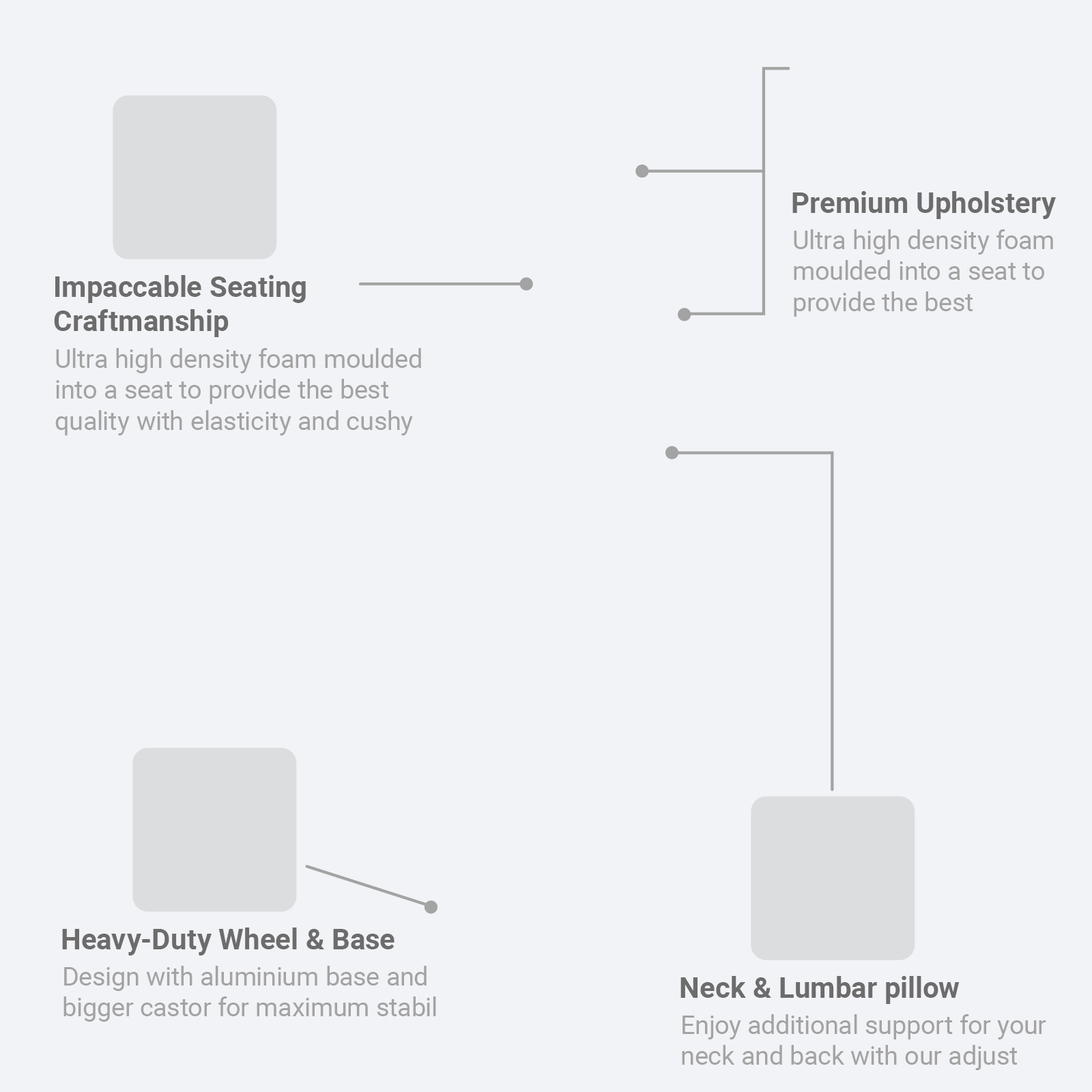
<style>
.page{position:relative;width:1092px;height:1092px;background:#f2f3f6}
.page>*{position:absolute;margin:0}
.t1{font:28.8px "Roboto-Bold";color:#6c6c6c}
.t2{font:25.8px "Roboto-Regular";color:#a3a3a3}
</style>
<div class="page">
<p class="t1" style="left:792px;top:191px;width:264px;height:28px">Premium Upholstery</p>
<p class="t2" style="left:794px;top:229px;width:259px;height:88px">Ultra high density foam moulded into a seat to provide the best</p>
<p class="t1" style="left:54px;top:275px;width:252px;height:62px">Impaccable Seating<br>Craftmanship</p>
<p class="t2" style="left:55px;top:348px;width:366px;height:87px">Ultra high density foam moulded into a seat to provide the best quality with elasticity and cushy seat</p>
<p class="t1" style="left:62px;top:928px;width:332px;height:27px">Heavy-Duty Wheel &amp; Base</p>
<p class="t2" style="left:63px;top:966px;width:373px;height:56px">Design with aluminium base and bigger castor for maximum stabil</p>
<p class="t1" style="left:680px;top:976px;width:280px;height:28px">Neck &amp; Lumbar pillow</p>
<p class="t2" style="left:682px;top:1014px;width:364px;height:56px">Enjoy additional support for your neck and back with our adjust</p>
</div>
